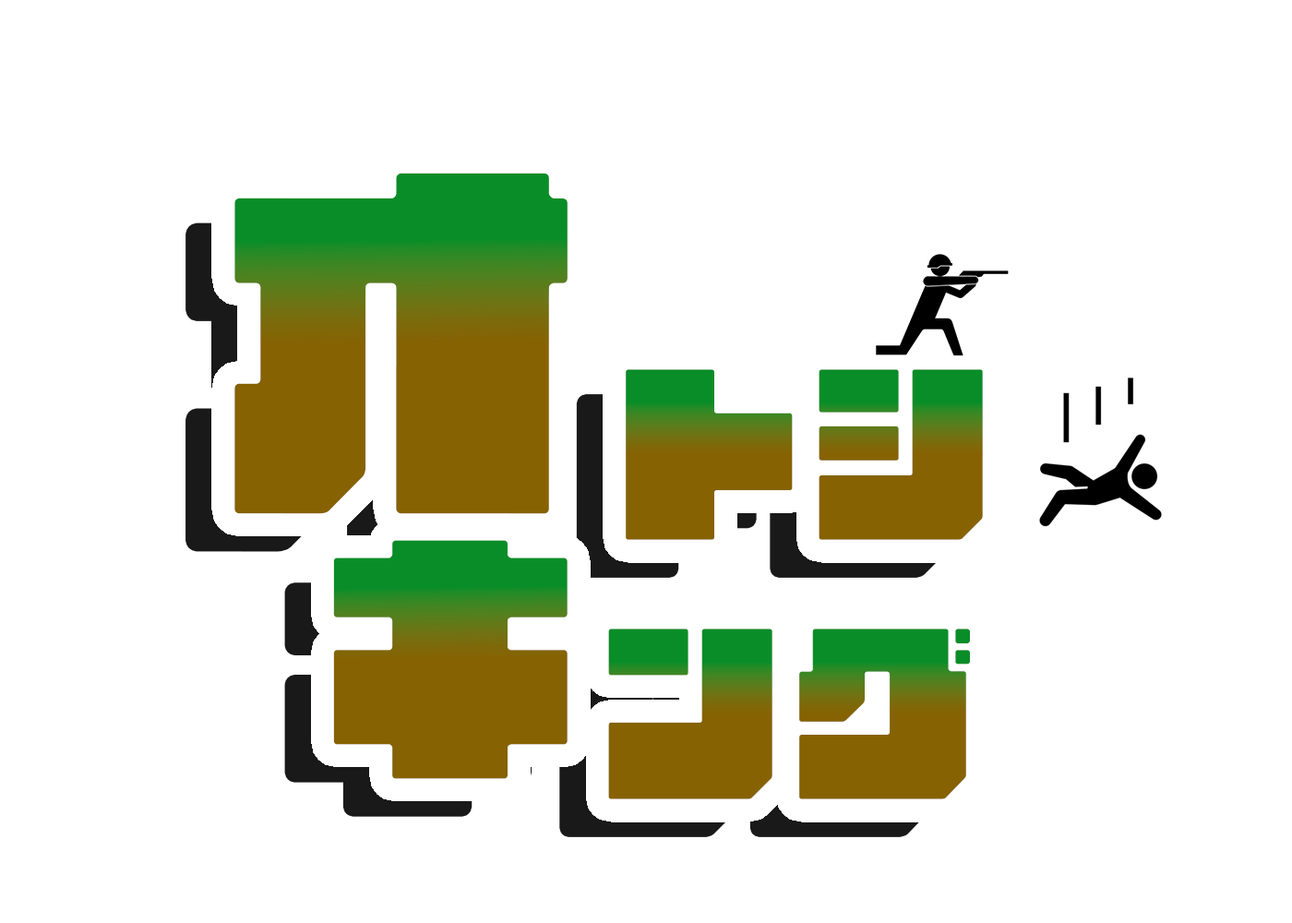
<style>
.page{position:relative;width:1292px;height:923px;background:#ffffff}
.page>*{position:absolute;margin:0}
.t1{font:384.5px "AB-countryroad"}
.t2{font:192.3px "AB-countryroad"}
.t3{font:269.2px "AB-countryroad"}
</style>
<div class="page">
<p class="t1" style="left:234px;top:173px;width:334px;height:341px">オ</p>
<p class="t2" style="left:626px;top:369px;width:357px;height:171px">トシ</p>
<p class="t3" style="left:333px;top:540px;width:235px;height:239px">キ</p>
<p class="t2" style="left:608px;top:628px;width:362px;height:171px">ング</p>
</div>
